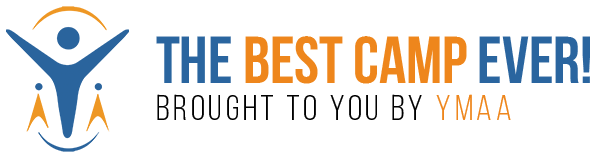
<style>
.page{position:relative;width:600px;height:158px;background:#ffffff}
.page>*{position:absolute;margin:0}
.t1{font:66.4px "BebasNeueBold";color:#ee861c}
.t2{font:66.4px "BebasNeueBold";color:#2a659f}
.t3{font:36px "BebasNeueBook";letter-spacing:0.1em;color:#000000}
.t4{font:36px "BebasNeueBook";letter-spacing:0.1em;color:#ee861c}
</style>
<div class="page">
<p class="t1" style="left:156px;top:36px;width:434px;height:48px"><span class="t2">The </span>best camp<span class="t2"> ever!</span></p>
<p class="t3" style="left:157px;top:94px;width:354px;height:26px">Brought to you by <span class="t4">YMAA</span></p>
</div>
